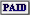
<style>
.page{position:relative;width:30px;height:15px;background:#d4d1d1}
.page>*{position:absolute;margin:0}
.t1{font:10px "TimesNewRomanPS-BoldMT"}
</style>
<div class="page">
<p class="t1" style="left:3px;top:4px;width:23px;height:7px">PAID</p>
</div>
